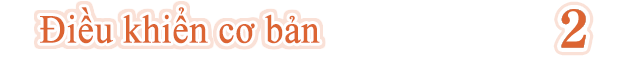
<style>
.page{position:relative;width:624px;height:57px;background:#ffffff}
.page>*{position:absolute;margin:0}
.t1{font:39.6px "TimesNewRomanPSMT";color:#dc6432;font-weight:bold;scale:0.91 1}
</style>
<div class="page">
<p class="t1" style="left:40px;top:7px;width:280px;height:37px">Điều khiển cơ bản</p>
</div>
